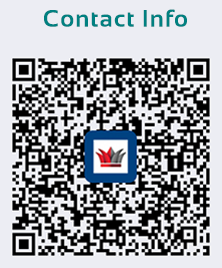
<style>
.page{position:relative;width:222px;height:268px;background:#ecedf3}
.page>*{position:absolute;margin:0}
.t1{font:24px "Sansation-Bold";letter-spacing:0.05em;color:#008080}
</style>
<div class="page">
<p class="t1" style="left:44px;top:9px;width:143px;height:18px">Contact Info</p>
</div>
